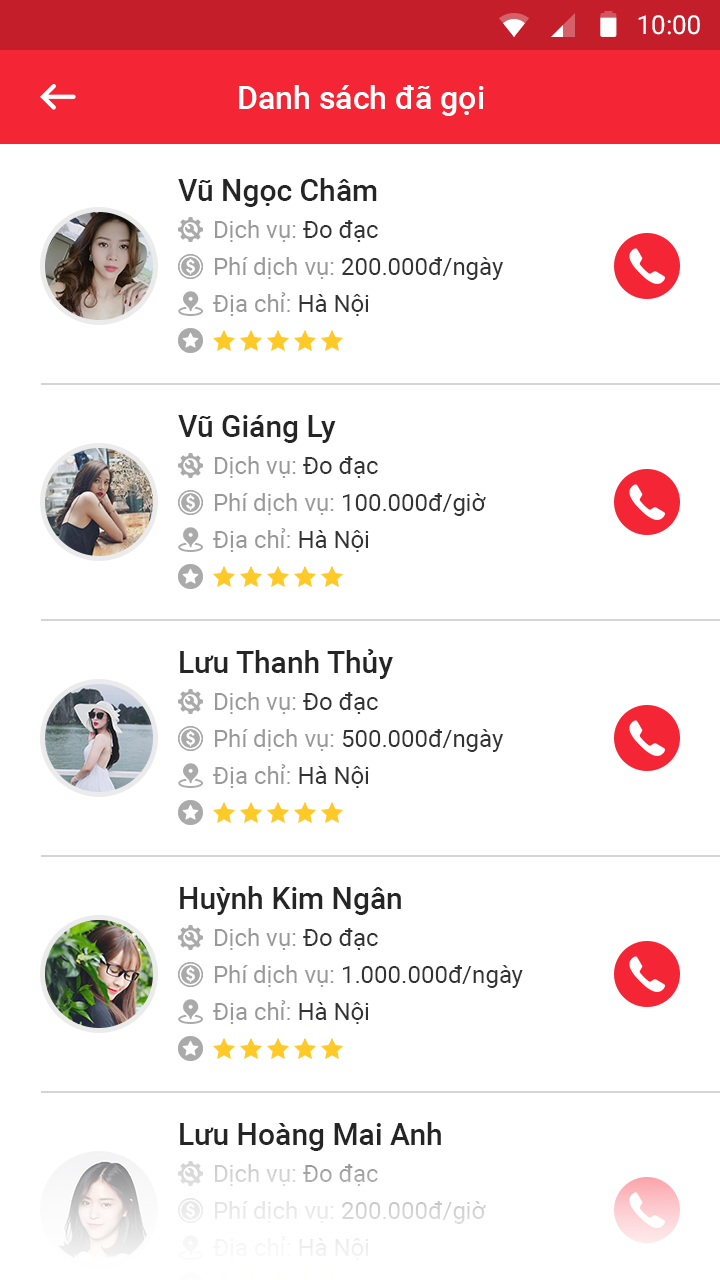
<style>
.page{position:relative;width:720px;height:1280px;background:#ffffff}
.page>*{position:absolute;margin:0}
.t1{font:26px "Roboto-Regular";color:#ffffff}
.t2{font:32px "Roboto-Medium";color:#ffffff}
.t3{font:30px "Roboto-Medium";color:#252525}
.t4{font:24px/37px "Roboto-Regular";color:#333333}
.t5{font:24px/37px "Roboto-Regular";color:#999999}
.t6{font:24px/37px "Roboto-Regular"}
</style>
<div class="page">
<p class="t1" style="left:638px;top:15px;width:62px;height:20px">10:00</p>
<p class="t2" style="left:239px;top:85px;width:245px;height:31px">Danh sách đã gọi</p>
<p class="t3" style="left:178px;top:178px;width:199px;height:29px">Vũ Ngọc Châm</p>
<p class="t4" style="left:213px;top:220px;width:291px;height:96px"><span class="t5">Dịch vụ: </span>Đo đạc<br><span class="t5">Phí dịch vụ: </span>200.000đ/ngày<br><span class="t5">Địa chỉ: </span>Hà Nội</p>
<p class="t3" style="left:178px;top:415px;width:158px;height:28px">Vũ Giáng Ly</p>
<p class="t5" style="left:213px;top:456px;width:273px;height:96px">Dịch vụ: <span class="t4">Đo đạc<br></span>Phí dịch vụ: <span class="t4">100.000đ/giờ<br></span>Địa chỉ: <span class="t4">Hà Nội</span></p>
<p class="t3" style="left:180px;top:649px;width:213px;height:30px">Lưu Thanh Thủy</p>
<p class="t4" style="left:213px;top:692px;width:291px;height:96px"><span class="t5">Dịch vụ: </span>Đo đạc<br><span class="t5">Phí dịch vụ: </span>500.000đ/ngày<br><span class="t5">Địa chỉ: </span>Hà Nội</p>
<p class="t3" style="left:180px;top:886px;width:221px;height:29px">Huỳnh Kim Ngân</p>
<p class="t4" style="left:213px;top:928px;width:310px;height:96px"><span class="t5">Dịch vụ: </span>Đo đạc<br><span class="t5">Phí dịch vụ: </span>1.000.000đ/ngày<br><span class="t5">Địa chỉ: </span>Hà Nội</p>
<p class="t3" style="left:180px;top:1122px;width:261px;height:29px">Lưu Hoàng Mai Anh</p>
<p class="t6" style="left:213px;top:1164px;width:273px;height:96px">Dịch vụ: Đo đạc<br>Phí dịch vụ: 200.000đ/giờ<br>Địa chỉ: Hà Nội</p>
</div>
